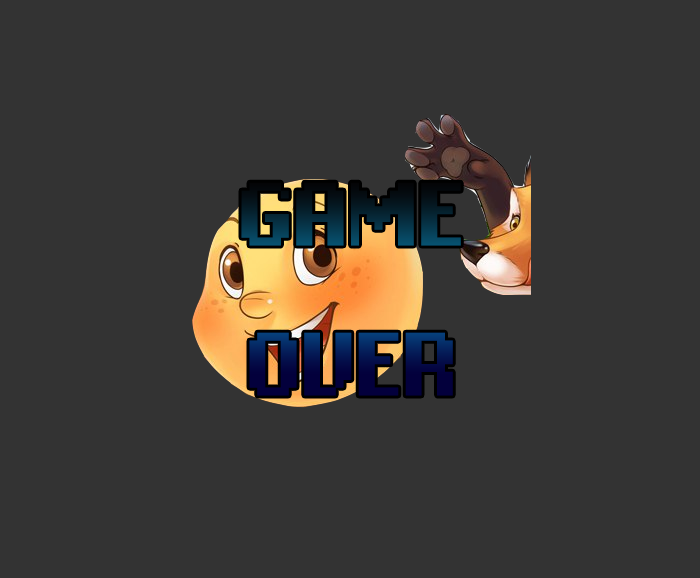
<style>
.page{position:relative;width:700px;height:578px;background:#333333}
.page>*{position:absolute;margin:0}
.t1{font:125px "Final-Fantasy-3/6-Font"}
</style>
<div class="page">
<p class="t1" style="left:241px;top:182px;width:220px;height:214px;text-align:center">GAME OVER</p>
</div>
